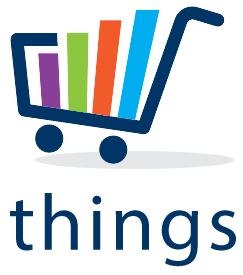
<style>
.page{position:relative;width:243px;height:275px;background:#ffffff}
.page>*{position:absolute;margin:0}
.t1{font:80.1px "MyriadPro-Regular";letter-spacing:0.05em;color:#013565}
</style>
<div class="page">
<p class="t1" style="left:10px;top:193px;width:226px;height:74px">things</p>
</div>
